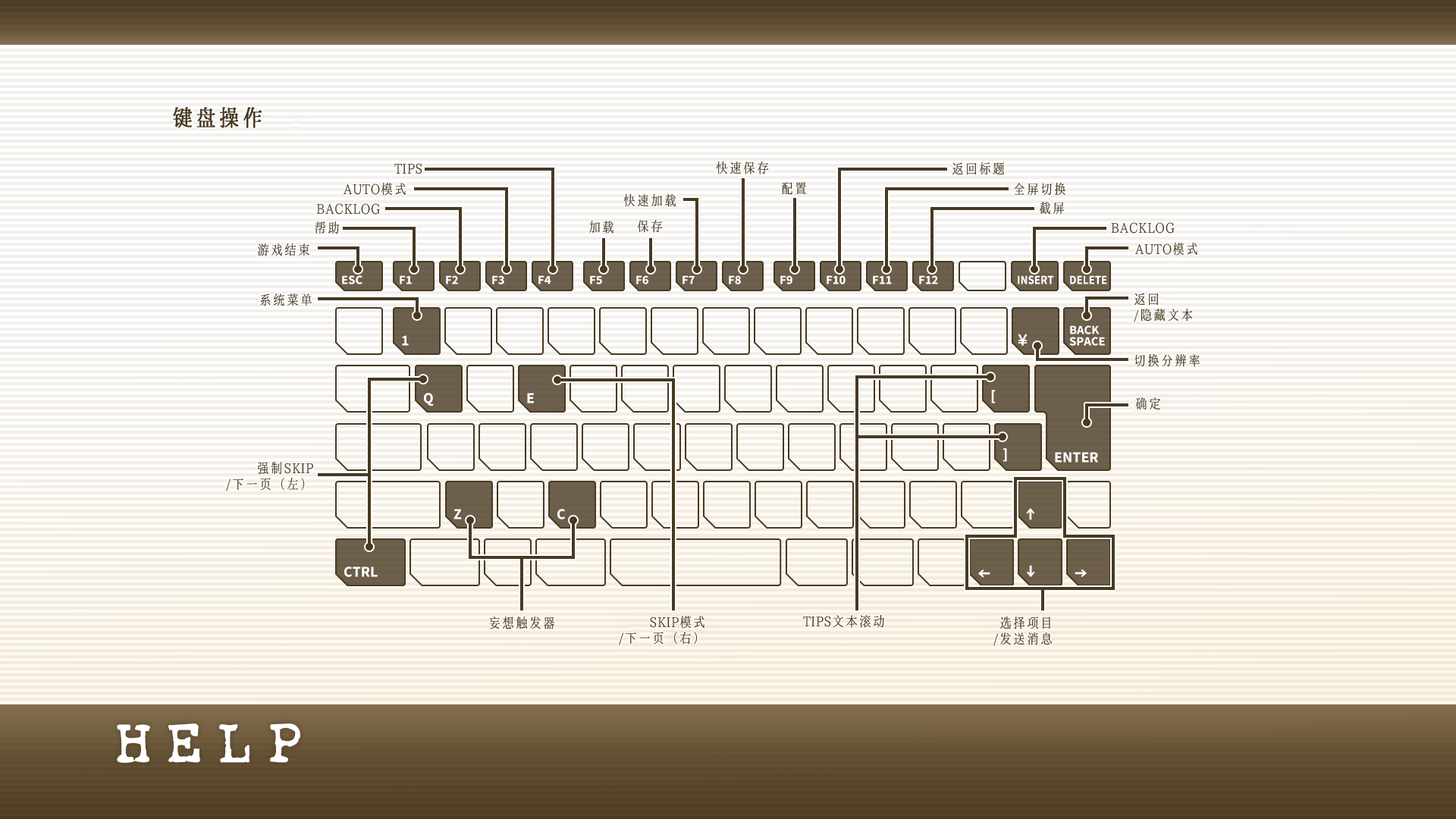
<style>
.page{position:relative;width:1456px;height:819px}
.page>*{position:absolute;margin:0}
.t1{font:22.7px "LXGWHeartSerif";color:#483922;font-weight:bold}
.t2{font:13.6px "LXGWHeartSerif";color:#483922}
.t3{font:13.6px "LXGWHeartSerif"}
</style>
<div class="page">
<p class="t1" style="left:173px;top:107px;width:89px;height:21px">键盘操作</p>
<p class="t2" style="left:716px;top:162px;width:53px;height:12px">快速保存</p>
<p class="t2" style="left:394px;top:163px;width:28px;height:11px">TIPS</p>
<p class="t2" style="left:952px;top:162px;width:52px;height:13px">返回标题</p>
<p class="t2" style="left:343px;top:183px;width:63px;height:13px">AUTO模式</p>
<p class="t2" style="left:782px;top:182px;width:25px;height:13px">配置</p>
<p class="t2" style="left:1014px;top:182px;width:51px;height:14px">全屏切换</p>
<p class="t2" style="left:623px;top:194px;width:53px;height:13px">快速加载</p>
<p class="t2" style="left:316px;top:203px;width:64px;height:12px">BACKLOG</p>
<p class="t3" style="left:1039px;top:202px;width:25px;height:13px">截屏</p>
<p class="t2" style="left:315px;top:221px;width:24px;height:13px">帮助</p>
<p class="t2" style="left:589px;top:221px;width:24px;height:13px">加载</p>
<p class="t2" style="left:637px;top:220px;width:26px;height:13px">保存</p>
<p class="t2" style="left:1111px;top:222px;width:64px;height:12px">BACKLOG</p>
<p class="t2" style="left:258px;top:243px;width:51px;height:13px">游戏结束</p>
<p class="t2" style="left:1134px;top:243px;width:63px;height:13px">AUTO模式</p>
<p class="t2" style="left:260px;top:293px;width:52px;height:13px">系统菜单</p>
<p class="t2" style="left:1134px;top:293px;width:59px;height:29px">返回<br>/隐藏文本</p>
<p class="t2" style="left:1134px;top:353px;width:66px;height:14px">切换分辨率</p>
<p class="t2" style="left:1135px;top:397px;width:25px;height:13px">确定</p>
<p class="t2" style="left:226px;top:462px;width:87px;height:29px;text-align:right">强制SKIP<br>/下一页（左）</p>
<p class="t2" style="left:489px;top:617px;width:65px;height:12px">妄想触发器</p>
<p class="t2" style="left:619px;top:616px;width:85px;height:29px;text-align:right">SKIP模式<br>/下一页（右）</p>
<p class="t2" style="left:803px;top:615px;width:81px;height:13px">TIPS文本滚动</p>
<p class="t2" style="left:993px;top:617px;width:60px;height:29px;text-align:right">选择项目<br>/发送消息</p>
</div>
